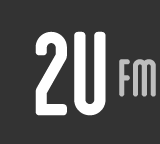
<style>
.page{position:relative;width:160px;height:144px;background:#333333}
.page>*{position:absolute;margin:0}
.t1{font:120.2px "Blanch-Condensed";letter-spacing:-0.02em;color:#ffffff;font-weight:bold}
.t2{font:53.5px "Blanch-Condensed";letter-spacing:-0.02em;color:#bebebe;font-weight:bold}
</style>
<div class="page">
<p class="t1" style="left:35px;top:31px;width:71px;height:85px">2u</p>
<p class="t2" style="left:119px;top:59px;width:37px;height:38px">fm</p>
</div>
